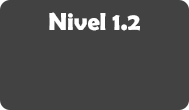
<style>
.page{position:relative;width:189px;height:110px;background:#424242}
.page>*{position:absolute;margin:0}
.t1{font:24.9px "BerlinSansFBDemi-Bold";color:#ffffff}
</style>
<div class="page">
<p class="t1" style="left:49px;top:12px;width:91px;height:19px">Nivel 1.2</p>
</div>
